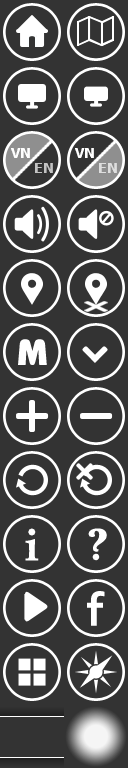
<style>
.page{position:relative;width:128px;height:768px;background:#333333}
.page>*{position:absolute;margin:0}
.t1{font:14px "Tahoma-Bold";color:#ffffff}
.t2{font:14px "Tahoma-Bold";color:#c3c3c3}
.t3{font:14px "Tahoma-Bold";color:#dedede}
.t4{font:45px "BookAntiqua-Bold";color:#ffffff}
.t5{font:48px "Corbel-Bold";color:#ffffff}
</style>
<div class="page">
<p class="t1" style="left:11px;top:148px;width:19px;height:10px">VN</p>
<p class="t1" style="left:75px;top:148px;width:19px;height:10px">VN</p>
<p class="t2" style="left:35px;top:163px;width:18px;height:10px">EN</p>
<p class="t3" style="left:99px;top:163px;width:18px;height:10px">EN</p>
<p class="t4" style="left:25px;top:528px;width:14px;height:33px">i</p>
<p class="t5" style="left:87px;top:591px;width:18px;height:35px">f</p>
</div>
